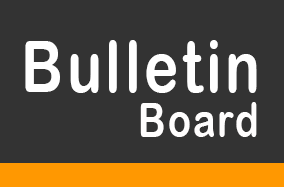
<style>
.page{position:relative;width:284px;height:187px;background:#333333}
.page>*{position:absolute;margin:0}
.t1{font:72px "ArialRoundedMTBold";letter-spacing:0.06em;color:#ffffff;scale:0.81 1}
.t2{font:48px "ArialRoundedMTBold";letter-spacing:0.06em;color:#fffefe;scale:0.79 1}
</style>
<div class="page">
<p class="t1" style="left:25px;top:40px;width:232px;height:53px">Bulletin</p>
<p class="t2" style="left:140px;top:102px;width:117px;height:35px">Board</p>
</div>
